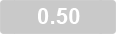
<style>
.page{position:relative;width:116px;height:34px;background:#c9c9c9}
.page>*{position:absolute;margin:0}
.t1{font:22.1px "Arial-BoldMT";color:#ffffff}
</style>
<div class="page">
<p class="t1" style="left:38px;top:8px;width:42px;height:16px">0.50</p>
</div>
